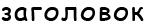
<style>
.page{position:relative;width:146px;height:28px;background:#ffffff}
.page>*{position:absolute;margin:0}
.t1{font:26.9px "ComicSansMS";letter-spacing:0.06em;color:#000000}
</style>
<div class="page">
<p class="t1" style="left:1px;top:7px;width:143px;height:14px">заголовок</p>
</div>
